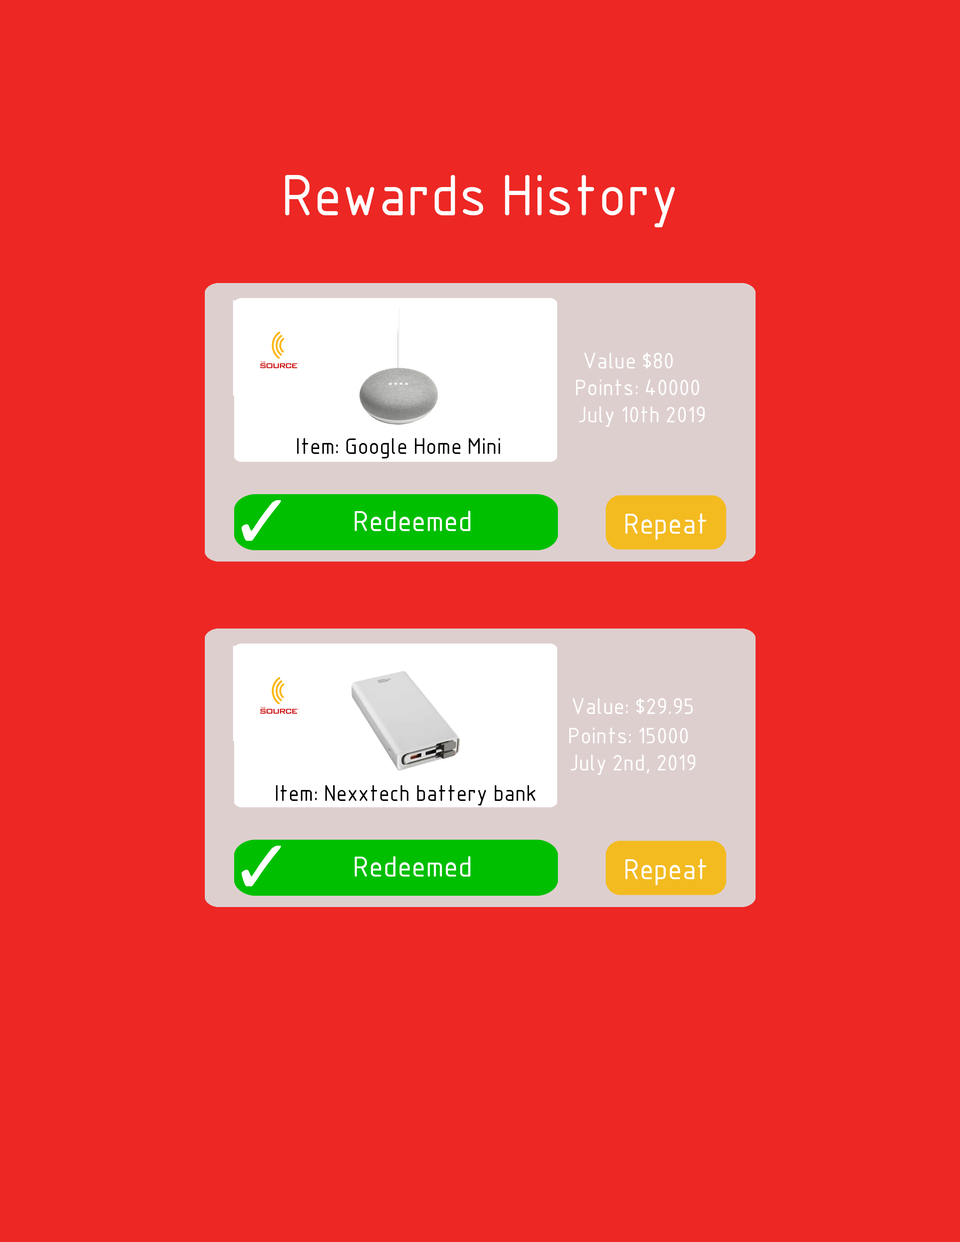
<style>
.page{position:relative;width:960px;height:1242px;background:#ed2724}
.page>*{position:absolute;margin:0}
.t1{font:56.5px "GOST-Common";color:#ffffff}
.t2{font:22px "GOST-Common";color:#ffffff}
.t3{font:22px "GOST-Common";color:#000000}
.t4{font:28.2px "GOST-Common";color:#ffffff}
</style>
<div class="page">
<p class="t1" style="left:285px;top:175px;width:390px;height:52px">Rewards History</p>
<p class="t2" style="left:584px;top:353px;width:89px;height:16px">Value $80</p>
<p class="t2" style="left:576px;top:379px;width:123px;height:16px">Points: 40000</p>
<p class="t2" style="left:579px;top:407px;width:126px;height:20px">July 10th 2019</p>
<p class="t3" style="left:297px;top:438px;width:203px;height:20px">Item: Google Home Mini</p>
<p class="t4" style="left:355px;top:511px;width:116px;height:20px">Redeemed</p>
<p class="t4" style="left:625px;top:513px;width:81px;height:27px">Repeat</p>
<p class="t2" style="left:573px;top:698px;width:120px;height:16px">Value: $29.95</p>
<p class="t2" style="left:569px;top:728px;width:119px;height:15px">Points: 15000</p>
<p class="t2" style="left:571px;top:755px;width:124px;height:20px">July 2nd, 2019</p>
<p class="t3" style="left:276px;top:785px;width:259px;height:21px">Item: Nexxtech battery bank</p>
<p class="t4" style="left:355px;top:856px;width:116px;height:21px">Redeemed</p>
<p class="t4" style="left:625px;top:859px;width:81px;height:26px">Repeat</p>
</div>
